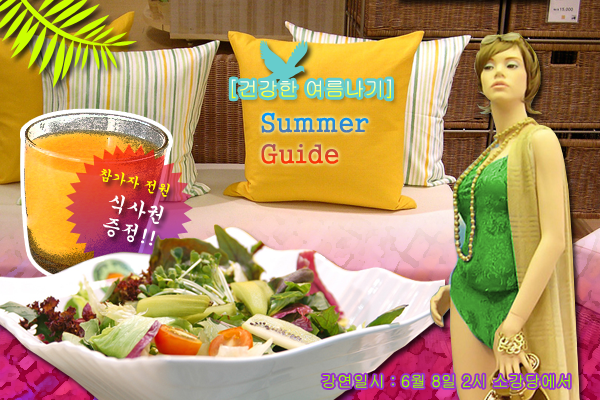
<style>
.page{position:relative;width:600px;height:400px}
.page>*{position:absolute;margin:0}
.t1{font:20px "Gulim"}
.t2{font:26px "Gungsuh"}
.t3{font:14px "Gungsuh";color:#ffff00}
.t4{font:20px "Gungsuh";color:#ffffff}
.t5{font:16px "Gulim";color:#99ff00}
</style>
<div class="page">
<p class="t1" style="left:231px;top:79px;width:160px;height:20px">[건강한 여름나기]</p>
<p class="t2" style="left:261px;top:112px;width:108px;height:52px">Summer <br>Guide</p>
<p class="t3" style="left:99px;top:168px;width:71px;height:29px;rotate:14deg">참가자 전원</p>
<p class="t4" style="left:103px;top:195px;width:61px;height:51px;rotate:15deg">식사권<br>증정!!</p>
<p class="t5" style="left:322px;top:374px;width:248px;height:14px">강연일시 : 6월 8일 2시 소강당에서</p>
</div>
